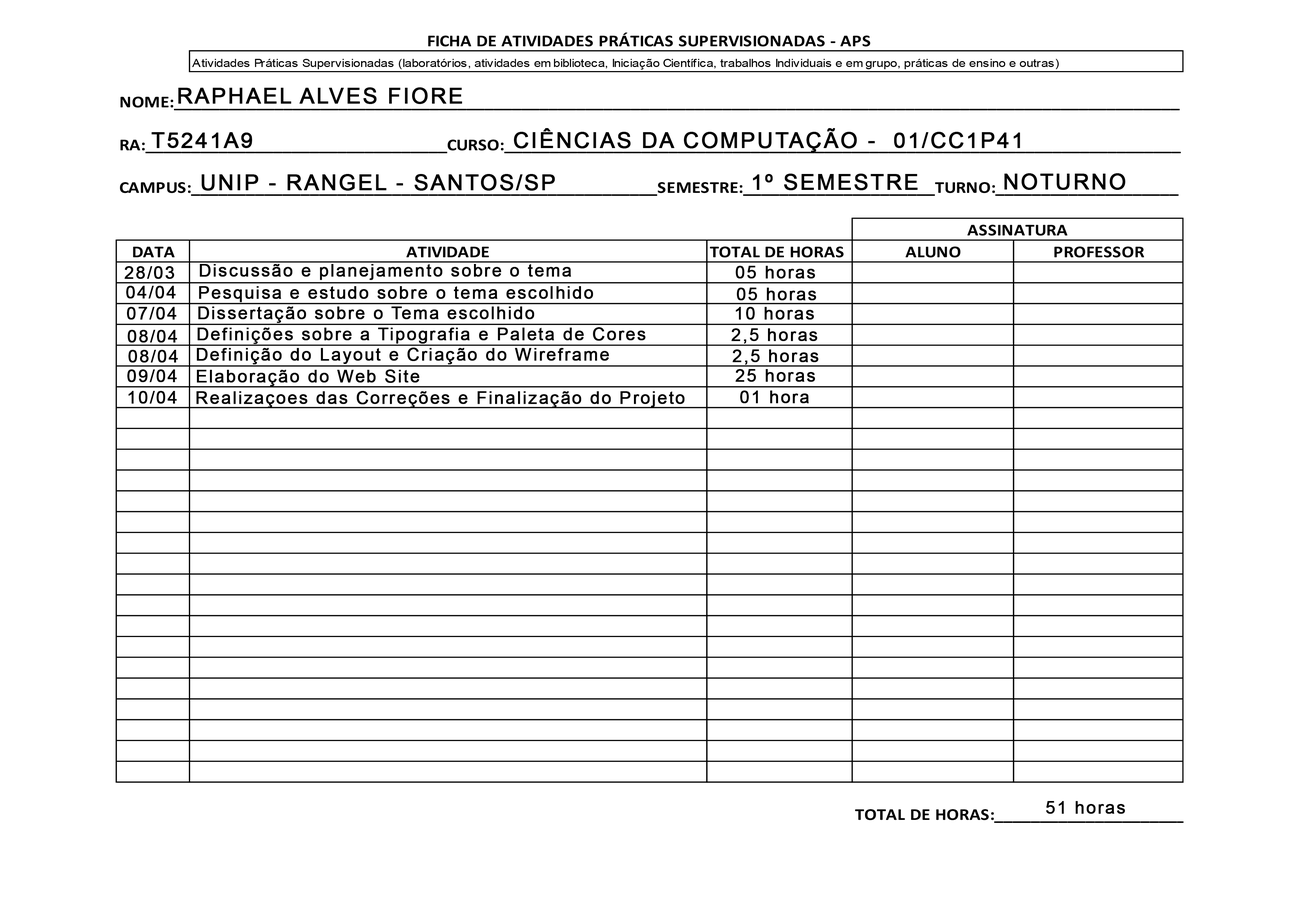
<style>
.page{position:relative;width:1299px;height:918px;background:#ffffff}
.page>*{position:absolute;margin:0}
.t1{font:21.9px "ArialMT";letter-spacing:0.07em;color:#000000;font-weight:bold}
.t2{font:17.5px "ArialMT";letter-spacing:0.07em;color:#000000;font-weight:bold}
</style>
<div class="page">
<p class="t1" style="left:178px;top:87px;width:284px;height:17px">RAPHAEL ALVES FIORE</p>
<p class="t1" style="left:151px;top:132px;width:101px;height:16px">T5241A9</p>
<p class="t1" style="left:514px;top:128px;width:506px;height:24px">CIÊNCIAS DA COMPUTAÇÃO -  01/CC1P41</p>
<p class="t1" style="left:753px;top:174px;width:164px;height:16px">1º SEMESTRE</p>
<p class="t1" style="left:1004px;top:173px;width:121px;height:17px">NOTURNO</p>
<p class="t1" style="left:201px;top:174px;width:354px;height:17px">UNIP - RANGEL - SANTOS/SP</p>
<p class="t2" style="left:124px;top:266px;width:50px;height:13px">28/03</p>
<p class="t2" style="left:200px;top:264px;width:371px;height:16px">Discussão e planejamento sobre o tema</p>
<p class="t2" style="left:736px;top:266px;width:79px;height:13px">05 horas</p>
<p class="t2" style="left:126px;top:286px;width:50px;height:13px">04/04</p>
<p class="t2" style="left:199px;top:286px;width:394px;height:16px">Pesquisa e estudo sobre o tema escolhido</p>
<p class="t2" style="left:737px;top:288px;width:79px;height:13px">05 horas</p>
<p class="t2" style="left:127px;top:307px;width:50px;height:13px">07/04</p>
<p class="t2" style="left:198px;top:307px;width:336px;height:16px">Dissertação sobre o Tema escolhido</p>
<p class="t2" style="left:736px;top:307px;width:78px;height:13px">10 horas</p>
<p class="t2" style="left:128px;top:330px;width:49px;height:13px">08/04</p>
<p class="t2" style="left:197px;top:327px;width:448px;height:17px">Definições sobre a Tipografia e Paleta de Cores</p>
<p class="t2" style="left:731px;top:328px;width:86px;height:16px">2,5 horas</p>
<p class="t2" style="left:128px;top:350px;width:50px;height:13px">08/04</p>
<p class="t2" style="left:197px;top:348px;width:412px;height:17px">Definição do Layout e Criação do Wireframe</p>
<p class="t2" style="left:732px;top:349px;width:86px;height:16px">2,5 horas</p>
<p class="t2" style="left:127px;top:369px;width:50px;height:13px">09/04</p>
<p class="t2" style="left:197px;top:369px;width:222px;height:18px">Elaboração do Web Site</p>
<p class="t2" style="left:735px;top:369px;width:80px;height:13px">25 horas</p>
<p class="t2" style="left:128px;top:391px;width:49px;height:13px">10/04</p>
<p class="t2" style="left:196px;top:391px;width:489px;height:17px">Realizaçoes das Correções e Finalização do Projeto</p>
<p class="t2" style="left:740px;top:391px;width:69px;height:13px">01 hora</p>
<p class="t2" style="left:1046px;top:801px;width:79px;height:13px">51 horas</p>
</div>
